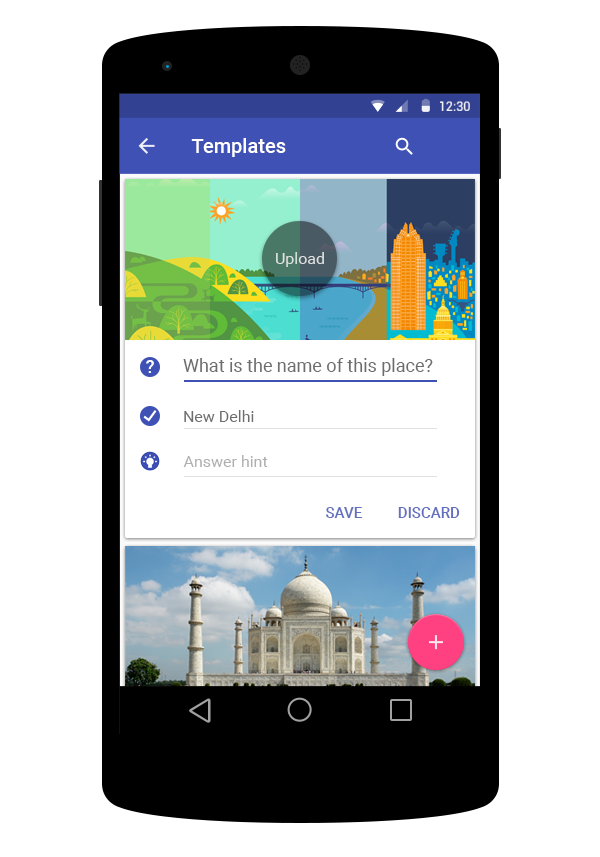
<style>
.page{position:relative;width:600px;height:857px;background:#ffffff}
.page>*{position:absolute;margin:0}
.t1{font:12.7px "Roboto-Regular";color:#ffffff}
.t2{font:20px "Roboto-Medium";color:#ffffff}
.t3{font:16px "Roboto-Regular";color:#dee0e0}
.t4{font:18px "Roboto-Regular";color:#6d6d6d}
.t5{font:16px "Roboto-Regular";color:#6d6d6d}
.t6{font:16px "Roboto-Regular";color:#afafaf}
.t7{font:15px "Roboto-Medium";color:#6370c0}
</style>
<div class="page">
<p class="t1" style="left:440px;top:101px;width:30px;height:10px">12:30</p>
<p class="t2" style="left:191px;top:138px;width:95px;height:19px">Templates</p>
<p class="t3" style="left:276px;top:252px;width:48px;height:15px">Upload</p>
<p class="t4" style="left:183px;top:358px;width:250px;height:18px">What is the name of this place?</p>
<p class="t5" style="left:184px;top:410px;width:70px;height:12px">New Delhi</p>
<p class="t6" style="left:183px;top:455px;width:85px;height:12px">Answer hint</p>
<p class="t7" style="left:326px;top:507px;width:134px;height:11px">SAVE DISCARD</p>
</div>
